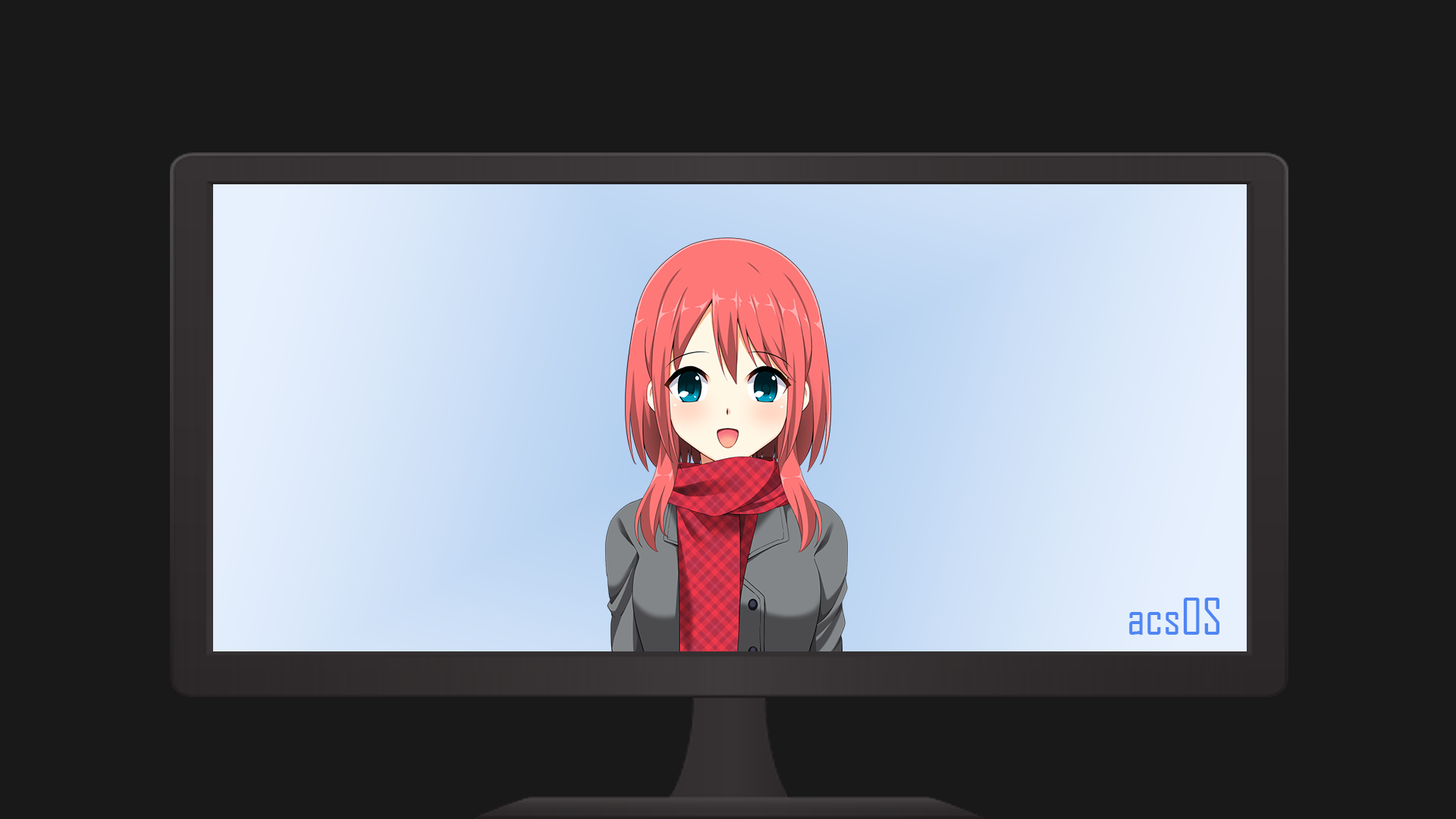
<style>
.page{position:relative;width:1456px;height:819px;background:#191919}
.page>*{position:absolute;margin:0}
.t1{font:48.5px "AgencyFB-Reg";color:#5086f3}
</style>
<div class="page">
<p class="t1" style="left:1129px;top:598px;width:90px;height:37px">acsOS</p>
</div>
